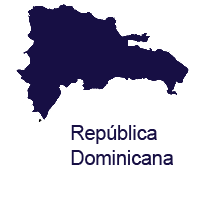
<style>
.page{position:relative;width:200px;height:200px;background:#ffffff}
.page>*{position:absolute;margin:0}
.t1{font:20.8px "ArialMT";color:#170f44;scale:0.94 1}
</style>
<div class="page">
<p class="t1" style="left:71px;top:125px;width:102px;height:40px">República<br>Dominicana</p>
</div>
